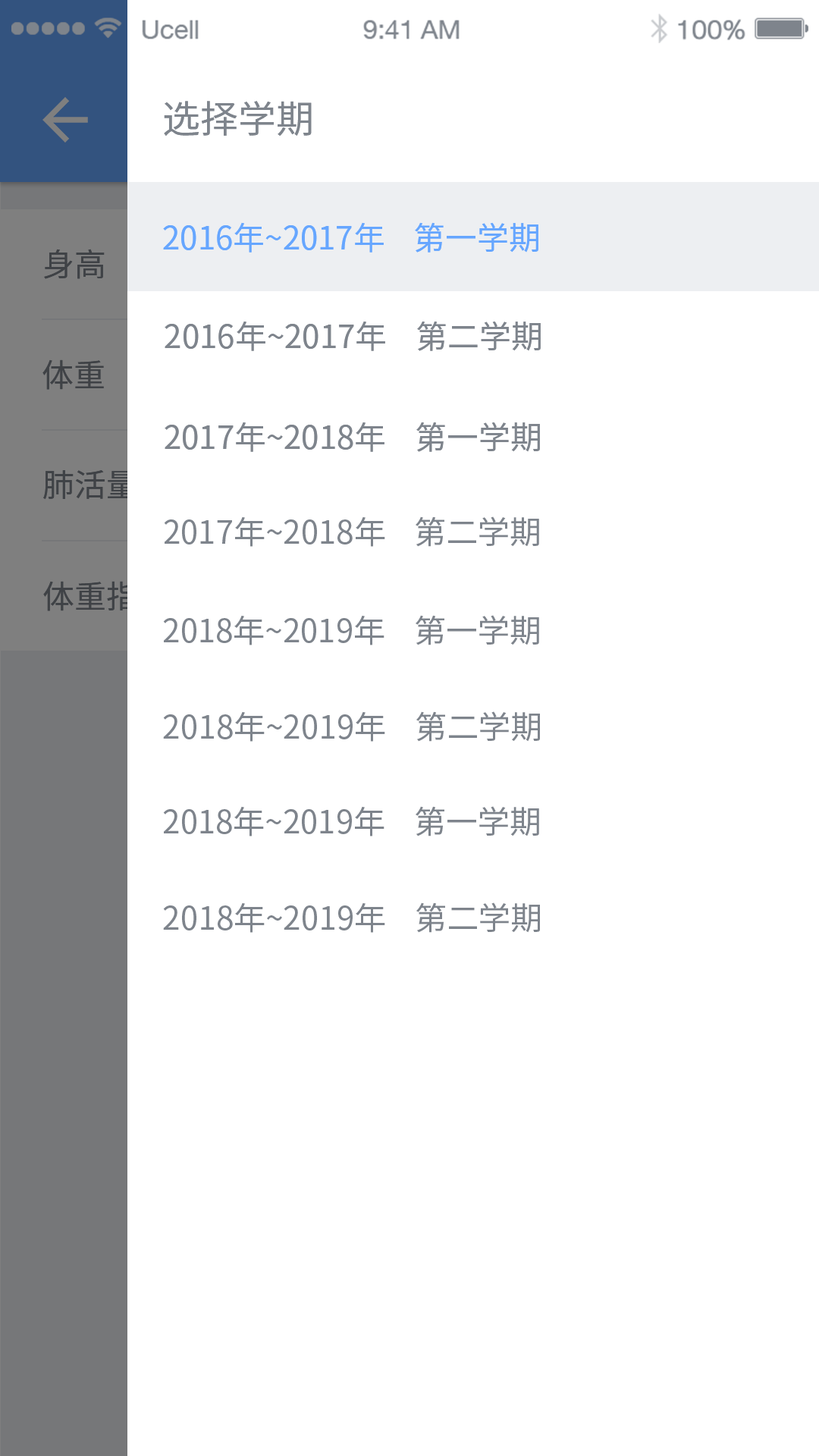
<style>
.page{position:relative;width:819px;height:1456px;background:#ffffff}
.page>*{position:absolute;margin:0}
.t1{font:37.9px "NotoSansHans-Regular";color:#7e848c}
.t2{font:31.8px "NotoSansHans-Regular";color:#66a6ff}
.t3{font:31.8px "NotoSansHans-Regular";color:#3f4246}
.t4{font:31.8px "NotoSansHans-Regular";color:#7e848c}
</style>
<div class="page">
<p class="t1" style="left:164px;top:101px;width:148px;height:35px">选择学期</p>
<p class="t2" style="left:163px;top:222px;width:375px;height:31px">2016年~2017年    第一学期</p>
<p class="t3" style="left:44px;top:249px;width:61px;height:30px">身高</p>
<p class="t4" style="left:165px;top:321px;width:376px;height:30px">2016年~2017年    第二学期</p>
<p class="t3" style="left:42px;top:359px;width:62px;height:31px">体重</p>
<p class="t4" style="left:165px;top:422px;width:375px;height:30px">2017年~2018年    第一学期</p>
<p class="t3" style="left:43px;top:470px;width:93px;height:30px">肺活量</p>
<p class="t4" style="left:164px;top:516px;width:375px;height:31px">2017年~2018年    第二学期</p>
<p class="t4" style="left:163px;top:615px;width:376px;height:30px">2018年~2019年    第一学期</p>
<p class="t4" style="left:163px;top:711px;width:377px;height:31px">2018年~2019年    第二学期</p>
<p class="t4" style="left:163px;top:806px;width:376px;height:30px">2018年~2019年    第一学期</p>
<p class="t4" style="left:163px;top:902px;width:377px;height:31px">2018年~2019年    第二学期</p>
</div>
